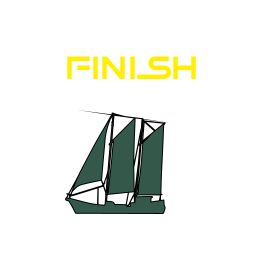
<style>
.page{position:relative;width:256px;height:256px;background:#ffffff}
.page>*{position:absolute;margin:0}
.t1{font:36px "GameOfSquids";color:#fff000;text-transform:uppercase}
</style>
<div class="page">
<p class="t1" style="left:67px;top:56px;width:129px;height:23px">FINISH</p>
</div>
